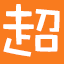
<style>
.page{position:relative;width:64px;height:64px;background:#f97b1e}
.page>*{position:absolute;margin:0}
.t1{font:72px "DFWaWaSC-W5";letter-spacing:0.2em;color:#ffffff}
</style>
<div class="page">
<p class="t1" style="left:3px;top:4px;width:57px;height:53px">超</p>
</div>
